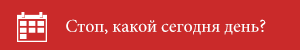
<style>
.page{position:relative;width:300px;height:50px;background:#ca2a2a}
.page>*{position:absolute;margin:0}
.t1{font:18px "MinionPro-Regular";color:#ffffff}
</style>
<div class="page">
<p class="t1" style="left:66px;top:19px;width:200px;height:16px">Стоп, какой сегодня день?</p>
</div>
